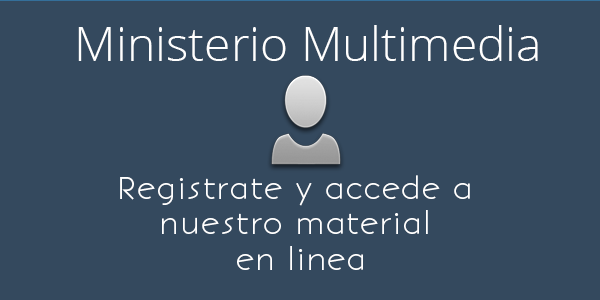
<style>
.page{position:relative;width:600px;height:300px;background:#34495e}
.page>*{position:absolute;margin:0}
.t1{font:48px "OpenSans-Light";color:#ffffff}
.t2{font:29.6px "BonvenoCF-Light";color:#ffffff}
</style>
<div class="page">
<p class="t1" style="left:78px;top:25px;width:460px;height:36px">Ministerio Multimedia</p>
<p class="t2" style="left:120px;top:175px;width:350px;height:95px;text-align:center">Registrate y accede a <br>nuestro material <br>en linea</p>
</div>
